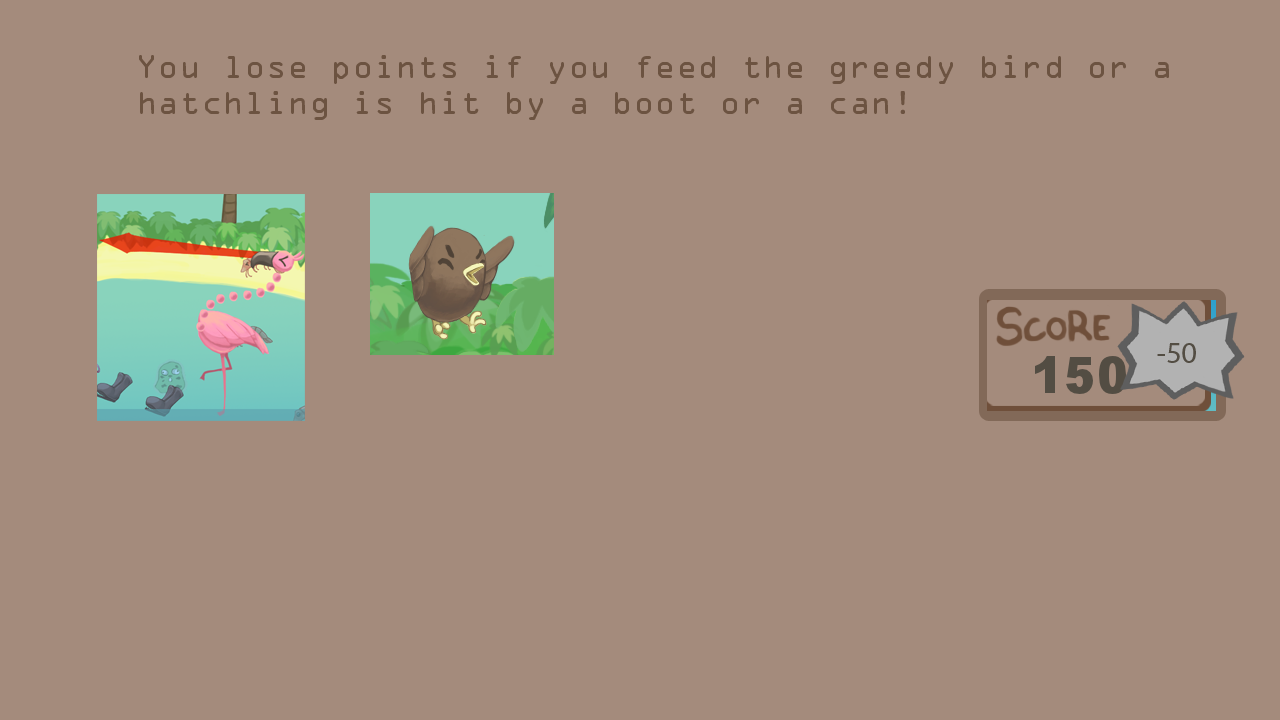
<style>
.page{position:relative;width:1280px;height:720px;background:#a48b7c}
.page>*{position:absolute;margin:0}
.t1{font:30px "OCRAStd";color:#6c5341}
</style>
<div class="page">
<p class="t1" style="left:139px;top:55px;width:1030px;height:65px">You lose points if you feed the greedy bird or a hatchling is hit by a boot or a can!</p>
</div>
